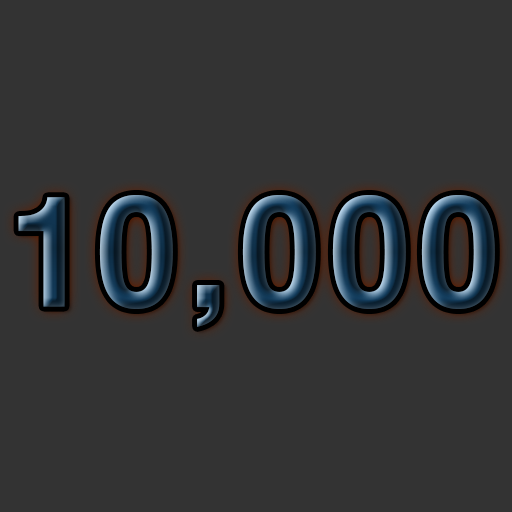
<style>
.page{position:relative;width:512px;height:512px;background:#333333}
.page>*{position:absolute;margin:0}
.t1{font:142.9px "H2gtrE"}
</style>
<div class="page">
<p class="t1" style="left:18px;top:195px;width:477px;height:132px">10,000</p>
</div>
